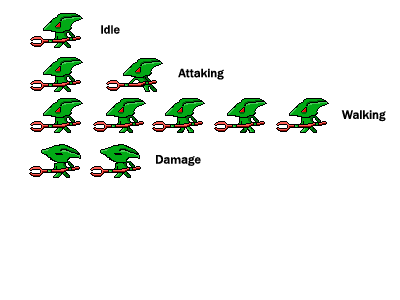
<style>
.page{position:relative;width:400px;height:300px;background:#ffffff}
.page>*{position:absolute;margin:0}
.t1{font:12.5px "FranklinGothic-Medium";color:#000000}
</style>
<div class="page">
<p class="t1" style="left:101px;top:25px;width:19px;height:9px">Idle</p>
<p class="t1" style="left:178px;top:68px;width:46px;height:12px">Attaking</p>
<p class="t1" style="left:341px;top:110px;width:45px;height:12px">Walking</p>
<p class="t1" style="left:156px;top:155px;width:45px;height:11px">Damage</p>
</div>
